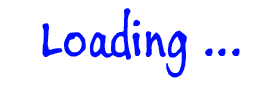
<style>
.page{position:relative;width:269px;height:86px;background:#ffffff}
.page>*{position:absolute;margin:0}
.t1{font:56px "BuxtonSketch";color:#000cff}
</style>
<div class="page">
<p class="t1" style="left:42px;top:8px;width:198px;height:70px">Loading ...</p>
</div>
